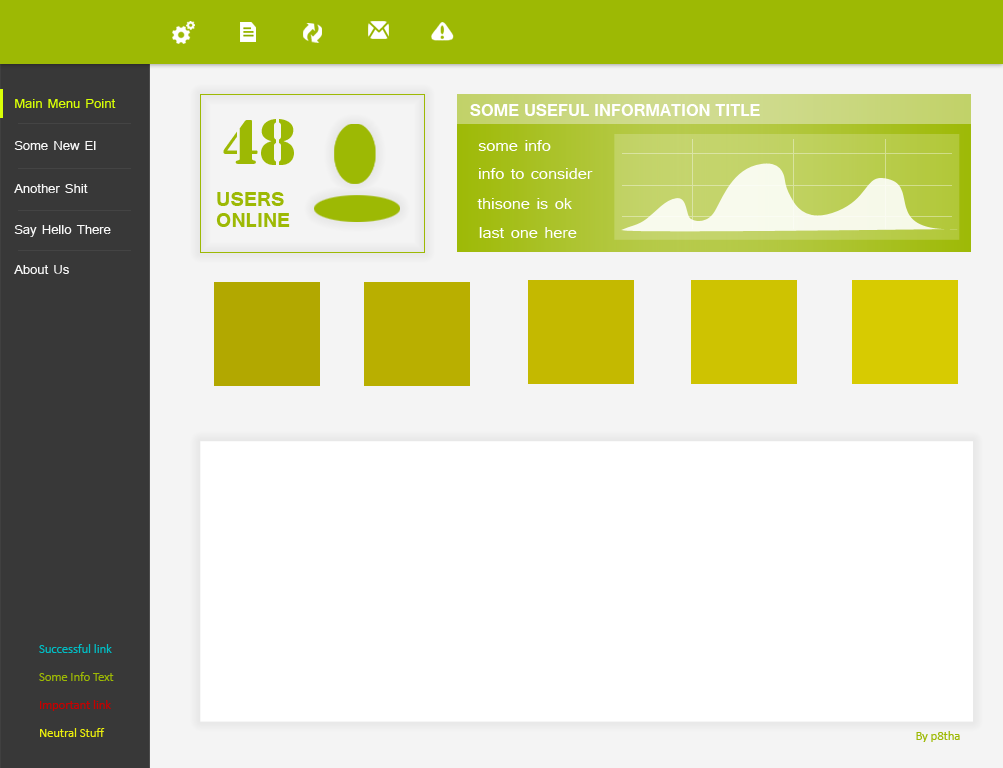
<style>
.page{position:relative;width:1003px;height:768px;background:#ffffff}
.page>*{position:absolute;margin:0}
.t1{font:16.7px "Tunga";color:#d8ff06}
.t2{font:20.8px "Tunga-Bold";color:#ffffff;text-transform:uppercase}
.t3{font:58.3px "StencilStd";color:#9db904}
.t4{font:16.7px "Tunga";color:#f7f7f7}
.t5{font:20.8px "Tunga";color:#ffffff}
.t6{font:25px/20.8px "Tunga-Bold";color:#9db904}
.t7{font:12.5px "Calibri";color:#00bfc6}
.t8{font:12.5px "Calibri";color:#9db904}
.t9{font:12.5px "Calibri";color:#c60000}
.t10{font:12.5px "Calibri";color:#ecef0c}
</style>
<div class="page">
<p class="t1" style="left:15px;top:99px;width:101px;height:9px">Main Menu Point</p>
<p class="t2" style="left:470px;top:104px;width:290px;height:12px">Some Useful information Title</p>
<p class="t3" style="left:223px;top:119px;width:71px;height:46px">48</p>
<p class="t4" style="left:14px;top:141px;width:82px;height:9px">Some New El</p>
<p class="t5" style="left:478px;top:140px;width:73px;height:11px">some info</p>
<p class="t5" style="left:479px;top:168px;width:114px;height:11px">info to consider</p>
<p class="t4" style="left:14px;top:184px;width:74px;height:9px">Another Shit</p>
<p class="t6" style="left:216px;top:192px;width:74px;height:35px">USERS<br>ONLINE</p>
<p class="t5" style="left:477px;top:198px;width:95px;height:11px">thisone is ok</p>
<p class="t4" style="left:14px;top:225px;width:97px;height:12px">Say Hello There</p>
<p class="t5" style="left:479px;top:227px;width:98px;height:11px">last one here</p>
<p class="t4" style="left:14px;top:265px;width:55px;height:9px">About Us</p>
<p class="t7" style="left:39px;top:644px;width:73px;height:9px">Successful link</p>
<p class="t8" style="left:39px;top:672px;width:75px;height:9px">Some Info Text</p>
<p class="t9" style="left:40px;top:700px;width:71px;height:11px">Important link</p>
<p class="t10" style="left:40px;top:728px;width:65px;height:9px">Neutral Stuff</p>
<p class="t8" style="left:916px;top:731px;width:44px;height:11px">By p8tha</p>
</div>
